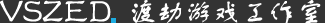
<style>
.page{position:relative;width:325px;height:23px;background:#333333}
.page>*{position:absolute;margin:0}
.t1{font:36.4px "FZSTK--GBK1-0";color:#ffffff;scale:0.93 1}
.t2{font:28px "FZSTK--GBK1-0";color:#ffffff}
</style>
<div class="page">
<p class="t1" style="left:0px;top:0px;width:111px;height:22px">VSZED</p>
<p class="t2" style="left:131px;top:0px;width:190px;height:25px">渡劫游戏工作室影之寺</p>
</div>
